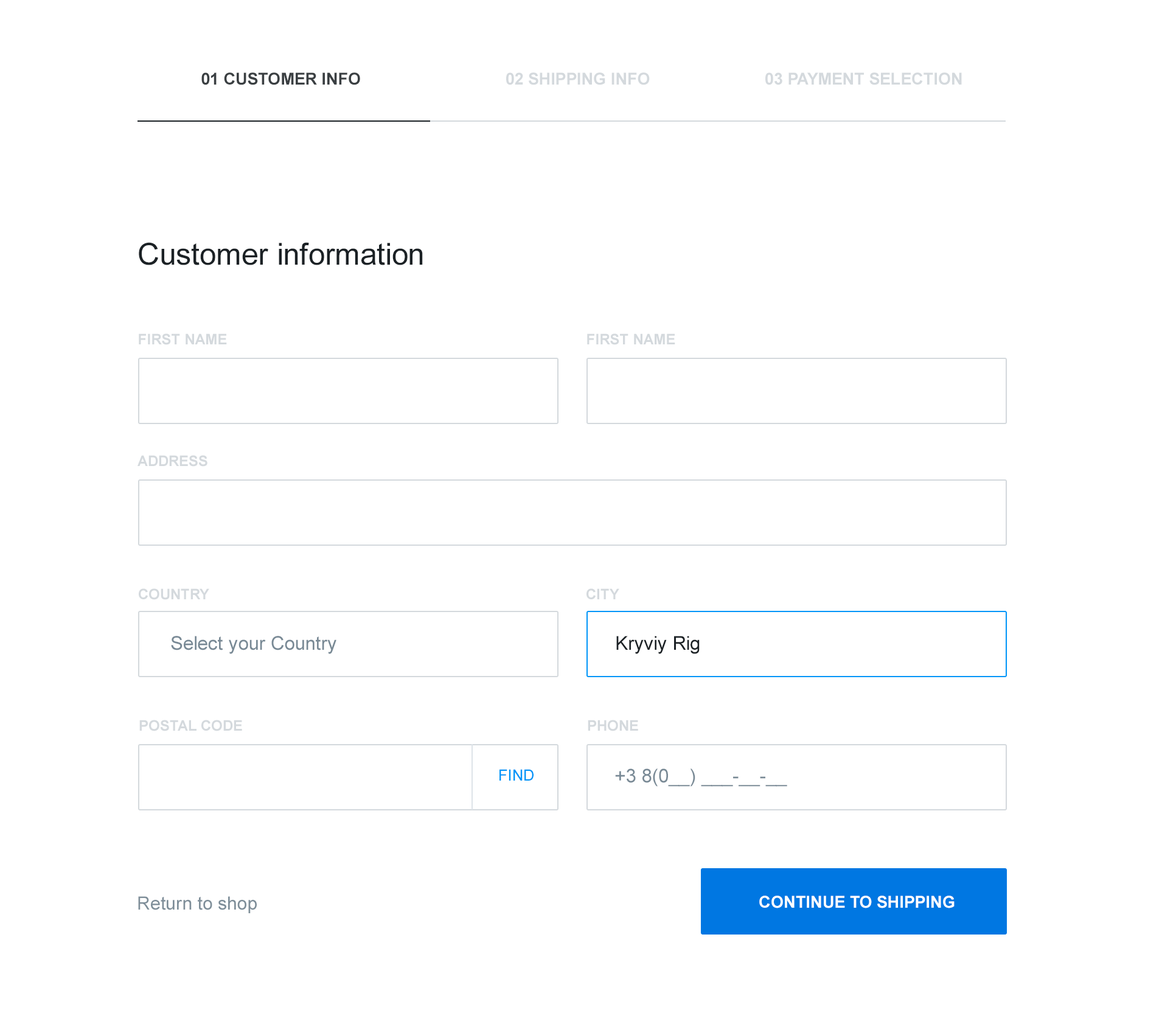
<style>
.page{position:relative;width:1162px;height:1027px;background:#ffffff}
.page>*{position:absolute;margin:0}
.t1{font:16.4px "Arial-BoldMT";color:#3a3f42;text-transform:uppercase}
.t2{font:16.4px "Arial-BoldMT";color:#d4d9dd;text-transform:uppercase}
.t3{font:30.3px "ArialMT";color:#1b2125}
.t4{font:14.6px "Arial-BoldMT";color:#d4d9dd;text-transform:uppercase}
.t5{font:19.1px "ArialMT";color:#788995}
.t6{font:19.1px "ArialMT";color:#1b2125}
.t7{font:15.3px "ArialMT";color:#0095f8}
.t8{font:18.2px "ArialMT";color:#7e8e99}
.t9{font:16.4px "Arial-BoldMT";color:#ffffff;text-transform:uppercase}
</style>
<div class="page">
<p class="t1" style="left:201px;top:72px;width:159px;height:13px">01 Customer info</p>
<p class="t2" style="left:506px;top:72px;width:144px;height:13px">02 Shipping info</p>
<p class="t2" style="left:765px;top:72px;width:196px;height:13px">03 Payment selection</p>
<p class="t3" style="left:139px;top:242px;width:284px;height:23px">Customer information</p>
<p class="t4" style="left:139px;top:333px;width:88px;height:12px">First name</p>
<p class="t4" style="left:587px;top:333px;width:88px;height:12px">First name</p>
<p class="t4" style="left:137px;top:455px;width:70px;height:11px">ADdress</p>
<p class="t4" style="left:139px;top:588px;width:70px;height:12px">Country</p>
<p class="t4" style="left:586px;top:588px;width:33px;height:11px">City</p>
<p class="t5" style="left:171px;top:636px;width:165px;height:18px">Select your Country</p>
<p class="t6" style="left:616px;top:636px;width:83px;height:18px">Kryviy Rig</p>
<p class="t4" style="left:139px;top:719px;width:103px;height:12px">Postal code</p>
<p class="t4" style="left:587px;top:719px;width:51px;height:12px">Phone</p>
<p class="t7" style="left:499px;top:769px;width:34px;height:11px">FIND</p>
<p class="t5" style="left:615px;top:768px;width:172px;height:18px">+3 8(0__) ___-__-__</p>
<p class="t8" style="left:138px;top:896px;width:119px;height:17px">Return to shop</p>
<p class="t9" style="left:759px;top:895px;width:195px;height:13px">Continue to shipping</p>
</div>
